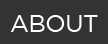
<style>
.page{position:relative;width:108px;height:44px;background:#333333}
.page>*{position:absolute;margin:0}
.t1{font:24px "GothamBook";letter-spacing:-0.02em;color:#ffffff}
</style>
<div class="page">
<p class="t1" style="left:10px;top:15px;width:88px;height:17px">ABOUT</p>
</div>
